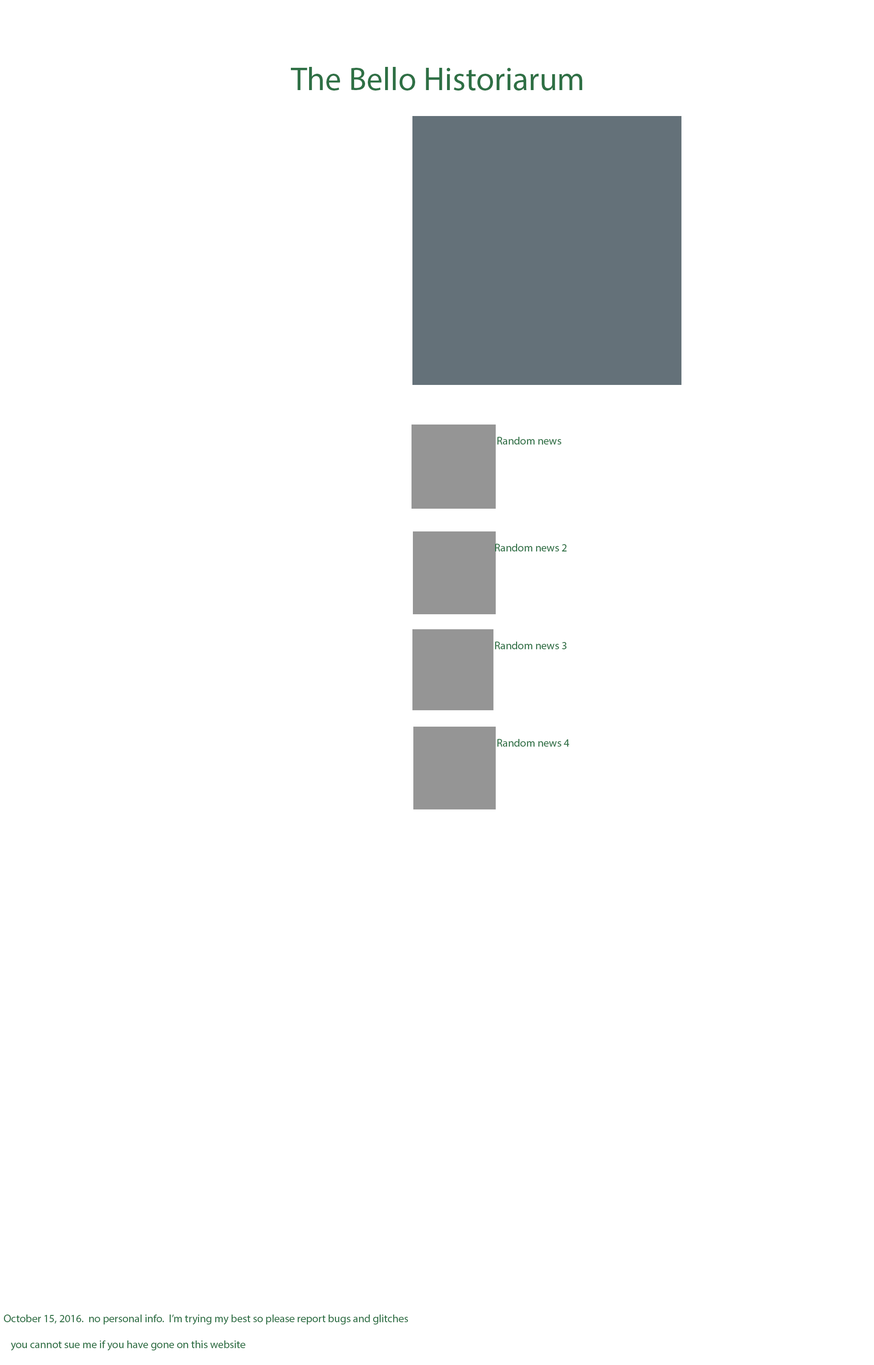
<style>
.page{position:relative;width:874px;height:1365px;background:#ffffff}
.page>*{position:absolute;margin:0}
.t1{font:32.8px "MyriadPro-Regular";color:#2f7045}
.t2{font:10.9px "MyriadPro-Regular";color:#2f7045}
</style>
<div class="page">
<p class="t1" style="left:291px;top:67px;width:291px;height:24px">The Bello Historiarum</p>
<p class="t2" style="left:497px;top:437px;width:64px;height:8px">Random news</p>
<p class="t2" style="left:495px;top:544px;width:71px;height:7px">Random news 2</p>
<p class="t2" style="left:495px;top:642px;width:71px;height:7px">Random news 3</p>
<p class="t2" style="left:497px;top:739px;width:72px;height:8px">Random news 4</p>
<p class="t2" style="left:4px;top:1314px;width:404px;height:36px">October 15, 2016.  no personal info.  I’m trying my best so please report bugs and glitches <br><br>   you cannot sue me if you have gone on this website</p>
</div>
